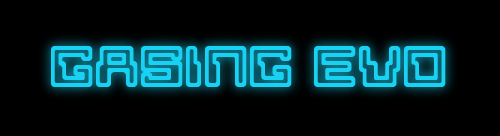
<style>
.page{position:relative;width:500px;height:136px;background:#000000}
.page>*{position:absolute;margin:0}
.t1{font:60px "Moonmonkey";color:#18d2f4}
</style>
<div class="page">
<p class="t1" style="left:51px;top:46px;width:395px;height:41px">GASING EVO</p>
</div>
